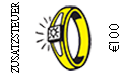
<style>
.page{position:relative;width:124px;height:76px;background:#ffffff}
.page>*{position:absolute;margin:0}
.t1{font:12px "AdobeDevanagari-Regular";color:#000000;scale:0.9 1}
.t2{font:14px "MyriadPro-Regular";color:#000000}
</style>
<div class="page">
<p class="t1" style="left:11px;top:2px;width:8px;height:71px;rotate:-90deg">ZUSATZSTEUER</p>
<p class="t2" style="left:109px;top:24px;width:10px;height:28px;rotate:-90deg">€100</p>
</div>
